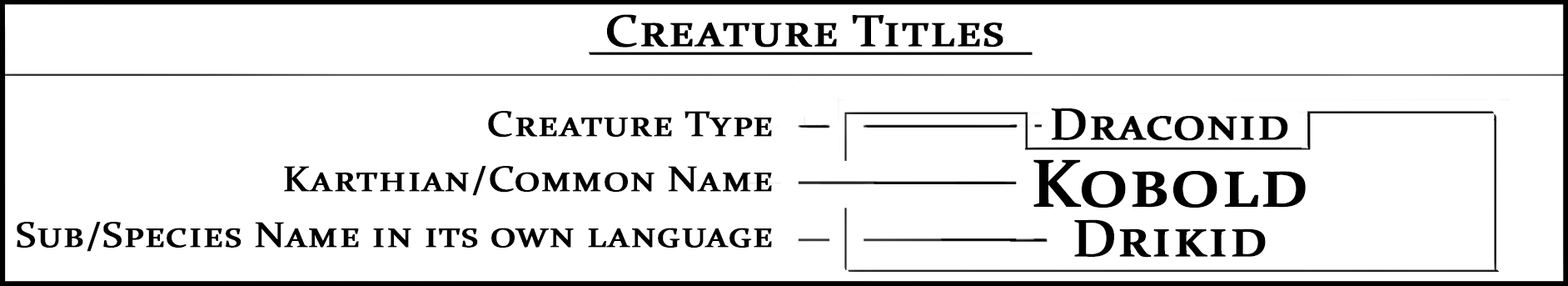
<style>
.page{position:relative;width:1568px;height:286px;background:#ffffff}
.page>*{position:absolute;margin:0}
.t1{font:45px "Constantia";color:#000000;font-variant:small-caps;font-weight:bold;scale:1.11 1}
.t2{font:35.9px "Constantia";color:#000000;font-variant:small-caps;font-weight:bold;scale:1.11 1}
.t3{font:67.4px/66.6px "Constantia";color:#000000;font-variant:small-caps;font-weight:bold;scale:1.11 1}
.t4{font:52.5px/50px "Constantia";color:#000000;font-variant:small-caps;font-weight:bold;scale:1.11 1}
</style>
<div class="page">
<p class="t1" style="left:607px;top:14px;width:396px;height:33px">Creature Titles</p>
<p class="t2" style="left:488px;top:111px;width:284px;height:26px">Creature Type</p>
<p class="t1" style="left:1033px;top:108px;width:273px;height:149px;text-align:center">Draconid<br><span class="t3">Kobold<br></span><span class="t4">Drikid</span></p>
<p class="t2" style="left:284px;top:166px;width:488px;height:30px">Karthian/Common Name</p>
<p class="t2" style="left:17px;top:222px;width:755px;height:29px">Sub/Species Name in its own language</p>
</div>
